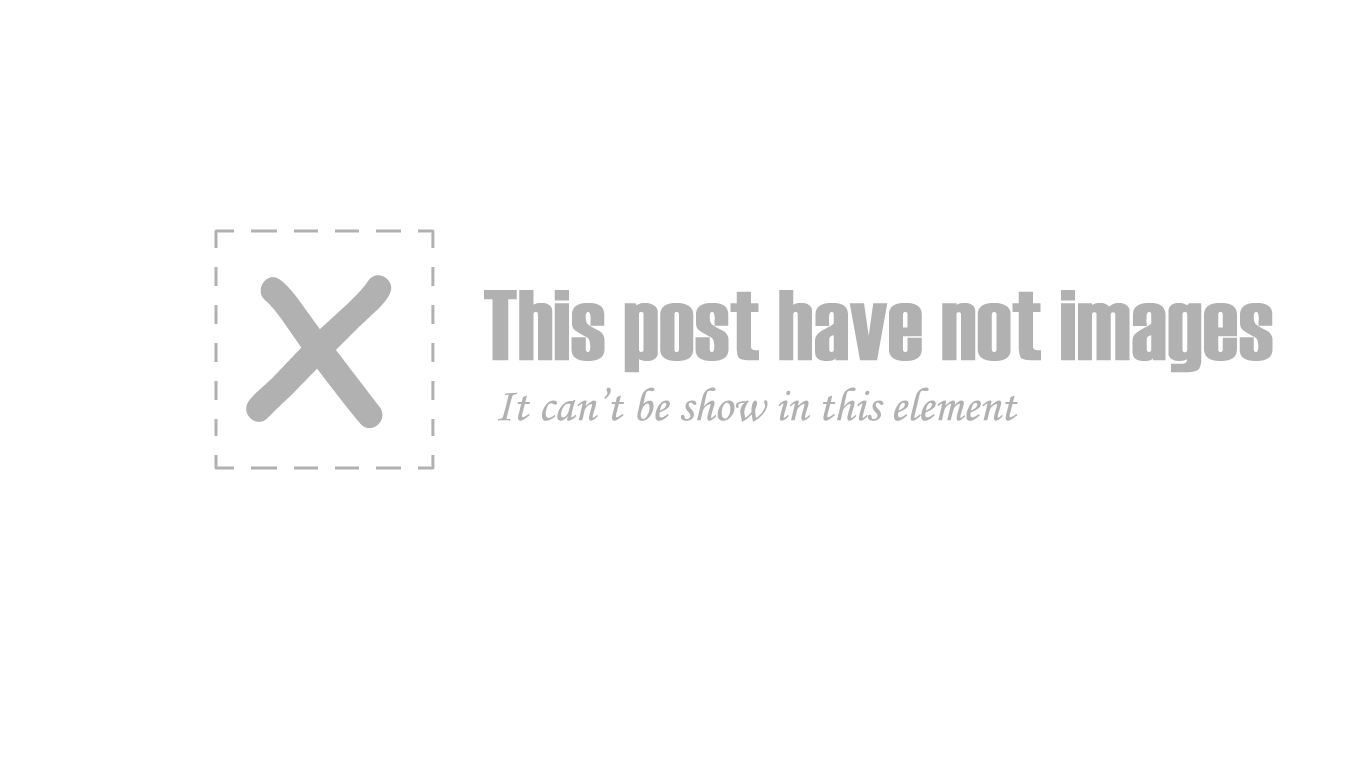
<style>
.page{position:relative;width:1360px;height:767px;background:#ffffff}
.page>*{position:absolute;margin:0}
.t1{font:272px "ComicSansMS";color:#b1b1b1}
.t2{font:100px "Haettenschweiler";color:#b1b1b1}
.t3{font:47px "MonotypeCorsiva";color:#b1b1b1}
</style>
<div class="page">
<p class="t1" style="left:246px;top:275px;width:146px;height:154px">x</p>
<p class="t2" style="left:484px;top:290px;width:789px;height:83px">This post have not images</p>
<p class="t3" style="left:498px;top:387px;width:520px;height:35px">It can’t be show in this element</p>
</div>
